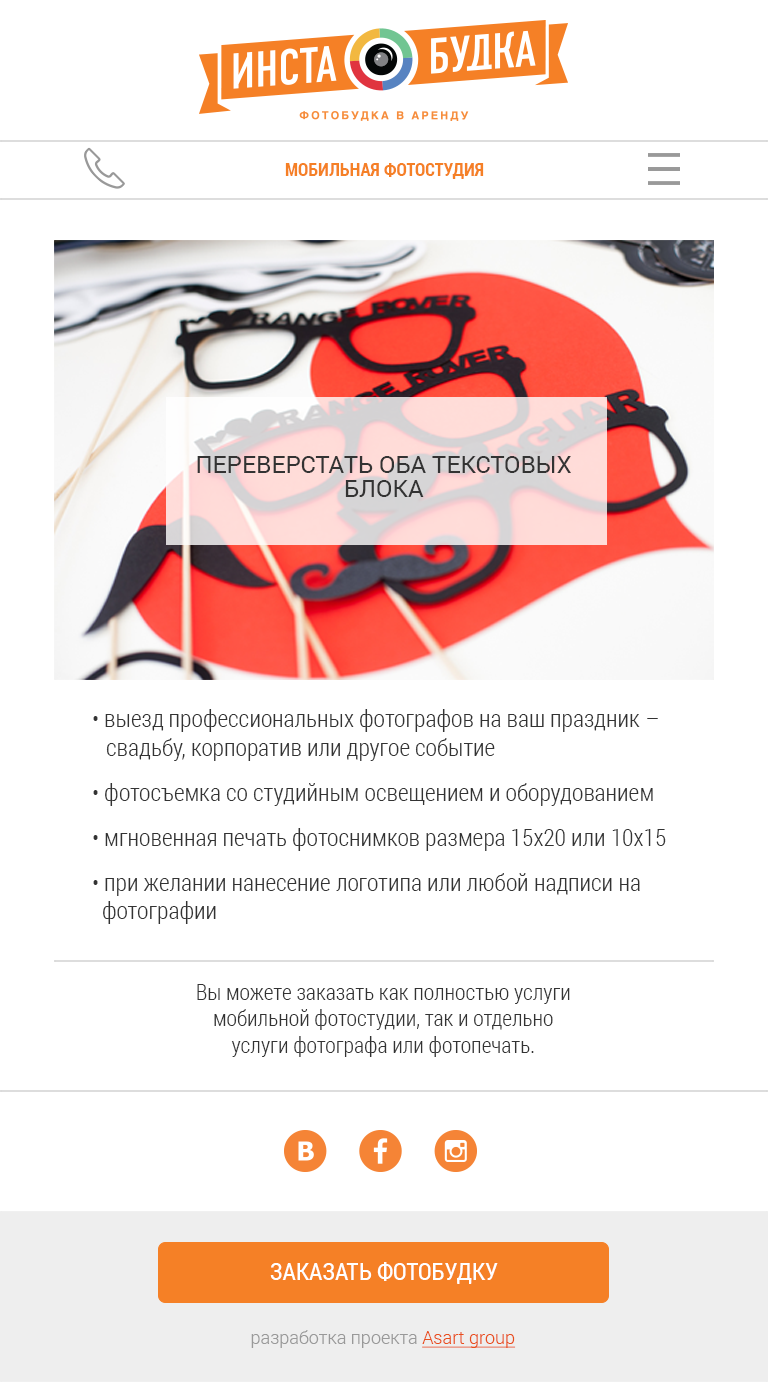
<style>
.page{position:relative;width:768px;height:1382px;background:#ffffff}
.page>*{position:absolute;margin:0}
.t1{font:18px "RobotoCondensed-Bold";color:#f58026;text-transform:uppercase}
.t2{font:24px/24px "Roboto-Regular";color:#333333;text-transform:uppercase}
.t3{font:24px "RobotoCondensed-Light";color:#333333}
.t4{font:22px "RobotoCondensed-Light";color:#333333}
.t5{font:24px "RobotoCondensed-Regular";color:#ffffff;text-transform:uppercase}
.t6{font:18px "Roboto-Light";color:#999999}
.t7{font:18px "Roboto-Light";color:#e94e1b;text-decoration:underline}
</style>
<div class="page">
<p class="t1" style="left:285px;top:163px;width:199px;height:16px">мобильная фотостудия</p>
<p class="t2" style="left:197px;top:456px;width:374px;height:41px;text-align:center">переверстать оба текстовых блока</p>
<p class="t3" style="left:93px;top:709px;width:573px;height:215px">• выезд профессиональных фотографов на ваш праздник –<br>свадьбу, корпоратив или другое событие<br> <br>• фотосъемка со студийным освещением и оборудованием<br> <br>• мгновенная печать фотоснимков размера 15х20 или 10х15<br> <br>• при желании нанесение логотипа или любой надписи на<br>фотографии</p>
<p class="t4" style="left:197px;top:984px;width:373px;height:73px;text-align:center">Вы можете заказать как полностью услуги<br>мобильной фотостудии, так и отдельно<br>услуги фотографа или фотопечать.</p>
<p class="t5" style="left:270px;top:1262px;width:228px;height:22px">заказать фотобудку</p>
<p class="t6" style="left:251px;top:1330px;width:265px;height:18px">разработка проекта <span class="t7">Asart group</span></p>
</div>
